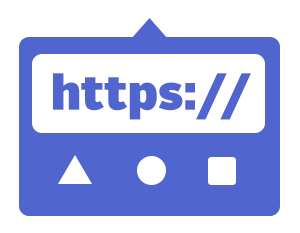
<style>
.page{position:relative;width:300px;height:233px;background:#ffffff}
.page>*{position:absolute;margin:0}
.t1{font:48.3px "AlrightSans-Ultra";color:#5065cd}
</style>
<div class="page">
<p class="t1" style="left:53px;top:73px;width:198px;height:47px">https://</p>
</div>
